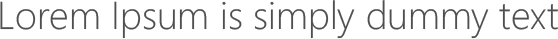
<style>
.page{position:relative;width:558px;height:39px;background:#ffffff}
.page>*{position:absolute;margin:0}
.t1{font:38.6px "SegoeWPN-Light";color:#4f4f4f}
</style>
<div class="page">
<p class="t1" style="left:0px;top:0px;width:558px;height:39px">Lorem Ipsum is simply dummy text</p>
</div>
